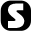
<style>
.page{position:relative;width:32px;height:35px;background:#ffffff}
.page>*{position:absolute;margin:0}
.t1{font:60px "BauhausStd-Heavy";color:#ffffff}
</style>
<div class="page">
<p class="t1" style="left:8px;top:3px;width:17px;height:25px">S</p>
</div>
